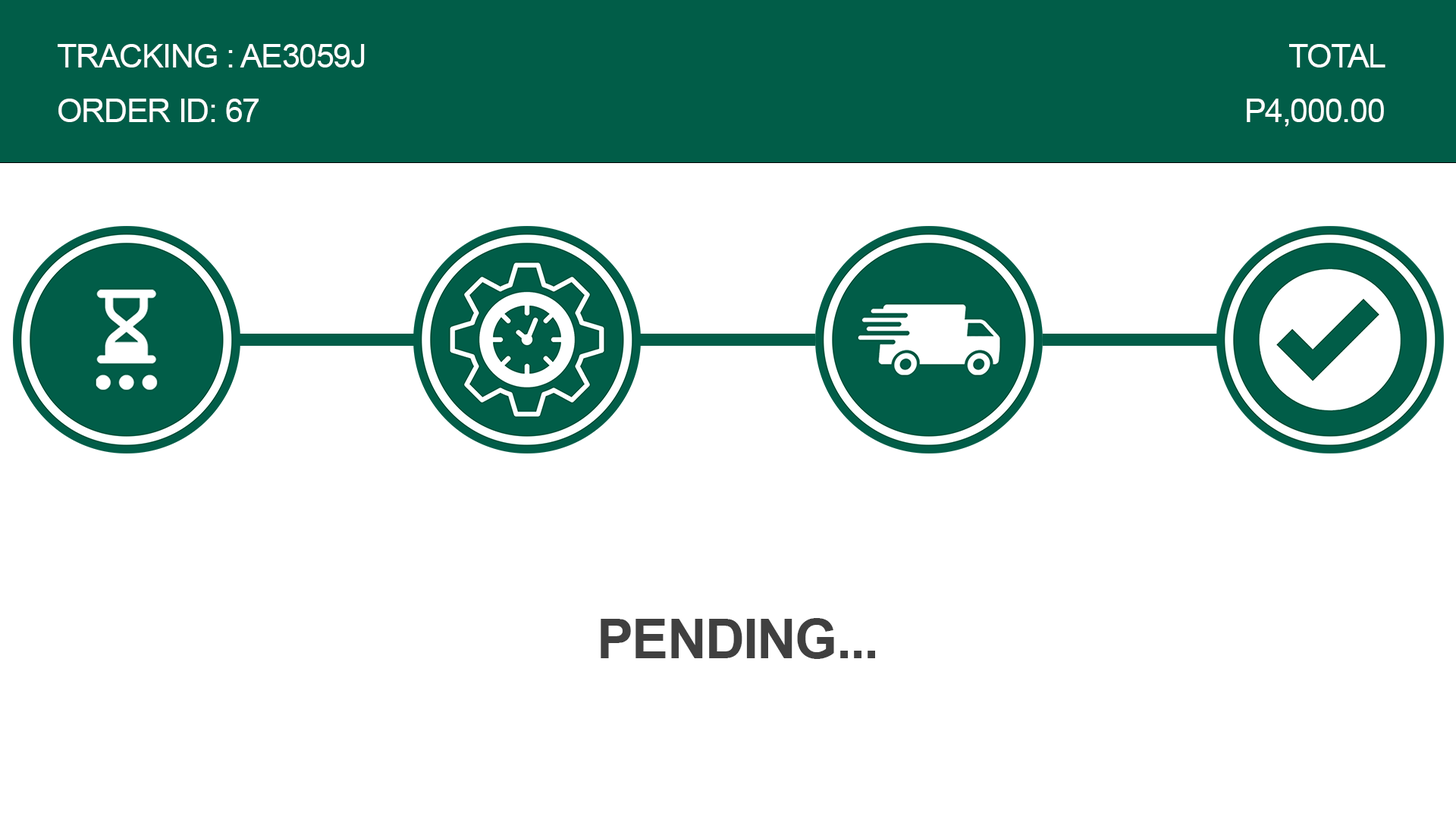
<style>
.page{position:relative;width:1456px;height:819px;background:#ffffff}
.page>*{position:absolute;margin:0}
.t1{font:32.3px/54.6px "ArialMT";letter-spacing:-0.025em;color:#ffffff}
.t2{font:32.3px "ArialMT";letter-spacing:-0.025em;color:#ffffff}
.t3{font:54.6px "Arial-BoldMT";letter-spacing:-0.025em;color:#404040}
</style>
<div class="page">
<p class="t1" style="left:58px;top:44px;width:307px;height:78px">TRACKING : AE3059J<br>ORDER ID: 67</p>
<p class="t2" style="left:1289px;top:44px;width:96px;height:23px">TOTAL</p>
<p class="t2" style="left:1247px;top:99px;width:137px;height:28px">P4,000.00</p>
<p class="t3" style="left:601px;top:618px;width:274px;height:41px">PENDING...</p>
</div>
